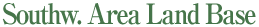
<style>
.page{position:relative;width:259px;height:27px;background:#ffffff}
.page>*{position:absolute;margin:0}
.t1{font:28px "RyuminPro-ExBold";letter-spacing:-0.08em;color:#46754a;scale:0.9 1}
</style>
<div class="page">
<p class="t1" style="left:2px;top:3px;width:254px;height:22px">Southw. Area Land Base</p>
</div>
